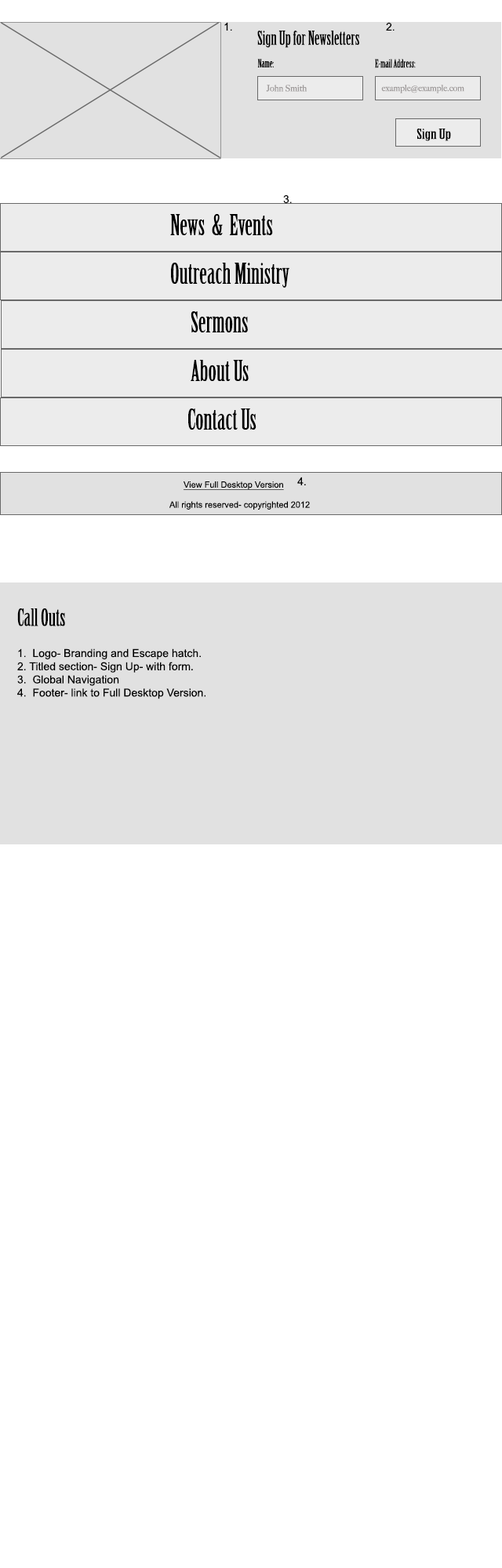
<style>
.page{position:relative;width:502px;height:1568px;background:#ffffff}
.page>*{position:absolute;margin:0}
.t1{font:11px "ArialMT";color:#000000}
.t2{font:18.8px "BirchStd";color:#000000}
.t3{font:11.1px "BirchStd";color:#000000}
.t4{font:8.7px "BigCaslon-Medium";color:#9d9999}
.t5{font:13.7px "BirchStd";color:#000000;scale:1.41 1}
.t6{font:28.2px "BirchStd";color:#000000}
.t7{font:8.6px "ArialMT";color:#000000;text-decoration:underline}
.t8{font:8.7px "ArialMT";color:#000000}
.t9{font:23.5px "BirchStd";color:#000000}
</style>
<div class="page">
<p class="t1" style="left:224px;top:22px;width:8px;height:9px">1.</p>
<p class="t1" style="left:386px;top:22px;width:8px;height:9px">2.</p>
<p class="t2" style="left:257px;top:31px;width:102px;height:17px">Sign Up for Newsletters</p>
<p class="t3" style="left:257px;top:59px;width:17px;height:8px">Name:</p>
<p class="t3" style="left:375px;top:59px;width:41px;height:9px">E-mail Address:</p>
<p class="t4" style="left:266px;top:85px;width:41px;height:7px">John Smith</p>
<p class="t4" style="left:381px;top:85px;width:83px;height:8px">example@example.com</p>
<p class="t5" style="left:416px;top:129px;width:35px;height:12px">Sign Up</p>
<p class="t1" style="left:283px;top:194px;width:9px;height:10px">3.</p>
<p class="t6" style="left:170px;top:214px;width:103px;height:21px">News  &amp;  Events</p>
<p class="t6" style="left:171px;top:263px;width:118px;height:25px">Outreach Ministry</p>
<p class="t6" style="left:191px;top:311px;width:57px;height:21px">Sermons</p>
<p class="t6" style="left:191px;top:360px;width:58px;height:21px">About Us</p>
<p class="t6" style="left:188px;top:408px;width:68px;height:22px">Contact Us</p>
<p class="t7" style="left:183px;top:481px;width:101px;height:9px">View Full Desktop Version</p>
<p class="t1" style="left:297px;top:477px;width:9px;height:8px">4.</p>
<p class="t8" style="left:169px;top:501px;width:141px;height:9px">All rights reserved- copyrighted 2012</p>
<p class="t9" style="left:17px;top:608px;width:48px;height:18px">Call Outs</p>
<p class="t1" style="left:17px;top:648px;width:188px;height:51px">1.  Logo- Branding and Escape hatch.<br>2. Titled section- Sign Up- with form.<br>3.  Global Navigation<br>4.  Footer- link to Full Desktop Version.</p>
</div>
